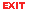
<style>
.page{position:relative;width:30px;height:26px;background:#ffffff}
.page>*{position:absolute;margin:0}
.t1{font:9px "Arial-Black";color:#f62424;text-transform:uppercase}
</style>
<div class="page">
<p class="t1" style="left:3px;top:2px;width:22px;height:7px">EXIT</p>
</div>
